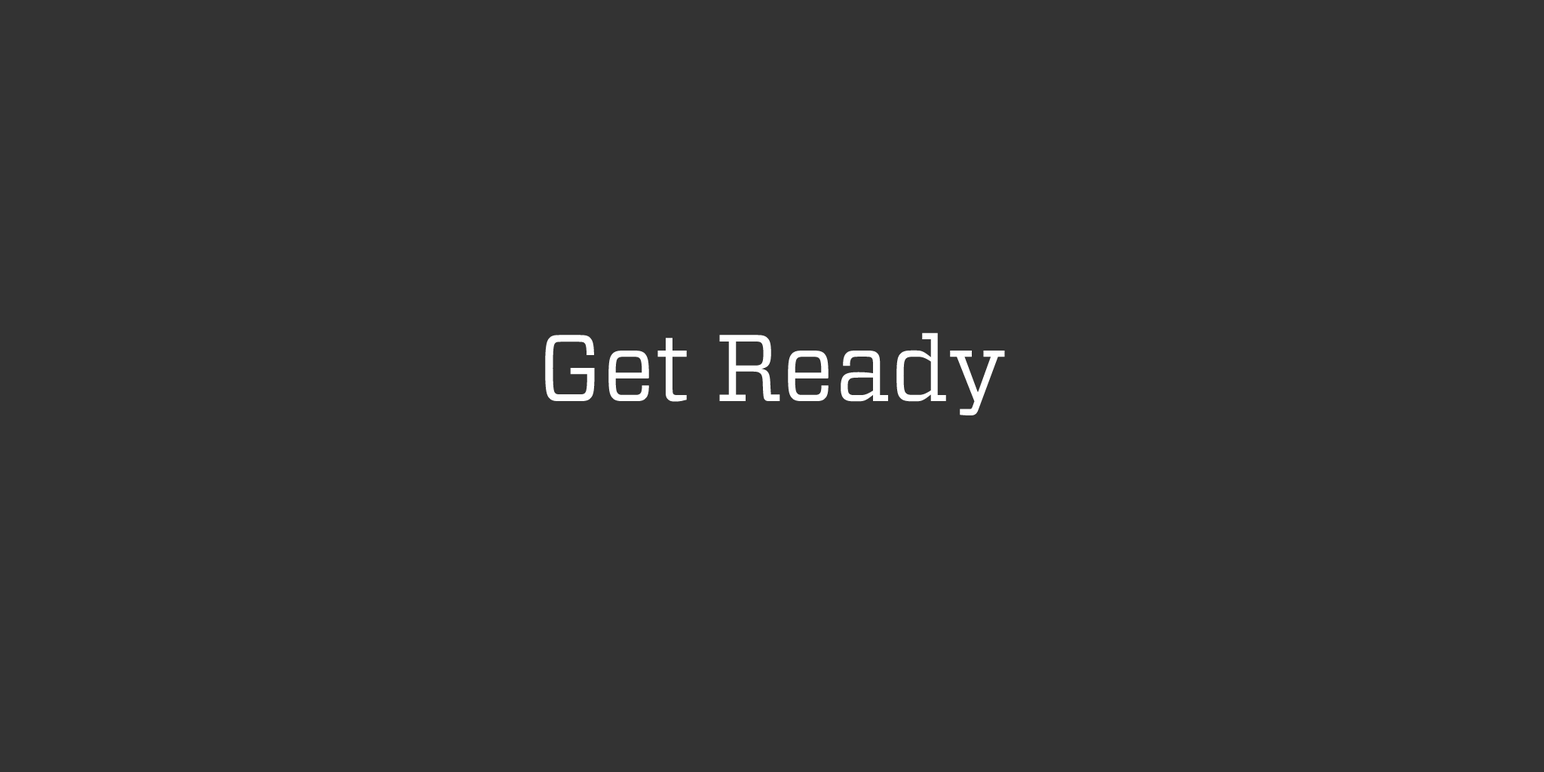
<style>
.page{position:relative;width:1544px;height:772px;background:#333333}
.page>*{position:absolute;margin:0}
.t1{font:94.3px "Vitesse-Book";color:#ffffff}
</style>
<div class="page">
<p class="t1" style="left:545px;top:333px;width:460px;height:82px">Get Ready</p>
</div>
